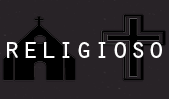
<style>
.page{position:relative;width:169px;height:99px;background:#282327}
.page>*{position:absolute;margin:0}
.t1{font:30px "OratorStd";color:#ffffff}
</style>
<div class="page">
<p class="t1" style="left:7px;top:42px;width:155px;height:16px">religioso</p>
</div>
